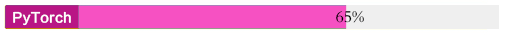
<style>
.page{position:relative;width:507px;height:35px;background:#f651c2}
.page>*{position:absolute;margin:0}
.t1{font:13.3px "FZLTCHK--GBK1-0";color:#ffffff}
.t2{font:17px "FZBSK--GBK1-0";color:#000000}
</style>
<div class="page">
<p class="t1" style="left:13px;top:11px;width:58px;height:15px">PyTorch</p>
<p class="t2" style="left:336px;top:10px;width:28px;height:13px">65%</p>
</div>
